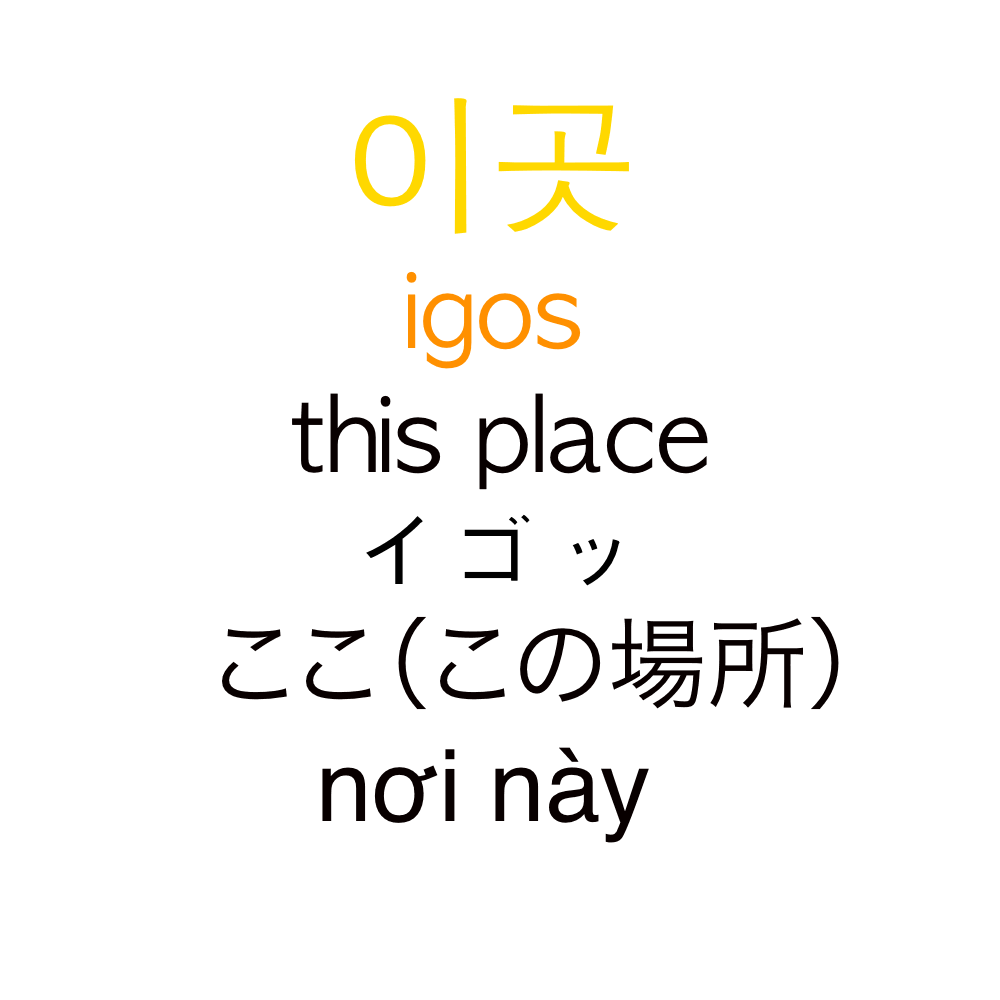
<style>
.page{position:relative;width:1000px;height:1000px;background:#ffffff}
.page>*{position:absolute;margin:0}
.t1{font:150px "AppleGothic";color:#ffd800}
.t2{font:100px "AppleGothic";color:#ff9000}
.t3{font:100px "AppleGothic";color:#080000}
.t4{font:100px "AppleGothic";color:#000000}
.t5{font:100px "HiraKakuProN-W3";color:#080000}
.t6{font:100px "Helvetica";color:#080000}
</style>
<div class="page">
<p class="t1" style="left:354px;top:98px;width:275px;height:136px">이곳</p>
<p class="t2" style="left:406px;top:271px;width:175px;height:98px">igos</p>
<p class="t3" style="left:292px;top:393px;width:416px;height:97px">this place</p>
<p class="t4" style="left:366px;top:514px;width:254px;height:72px">イゴッ</p>
<p class="t5" style="left:222px;top:616px;width:617px;height:94px">ここ（この場所）</p>
<p class="t6" style="left:322px;top:747px;width:327px;height:96px">nơi này</p>
</div>
